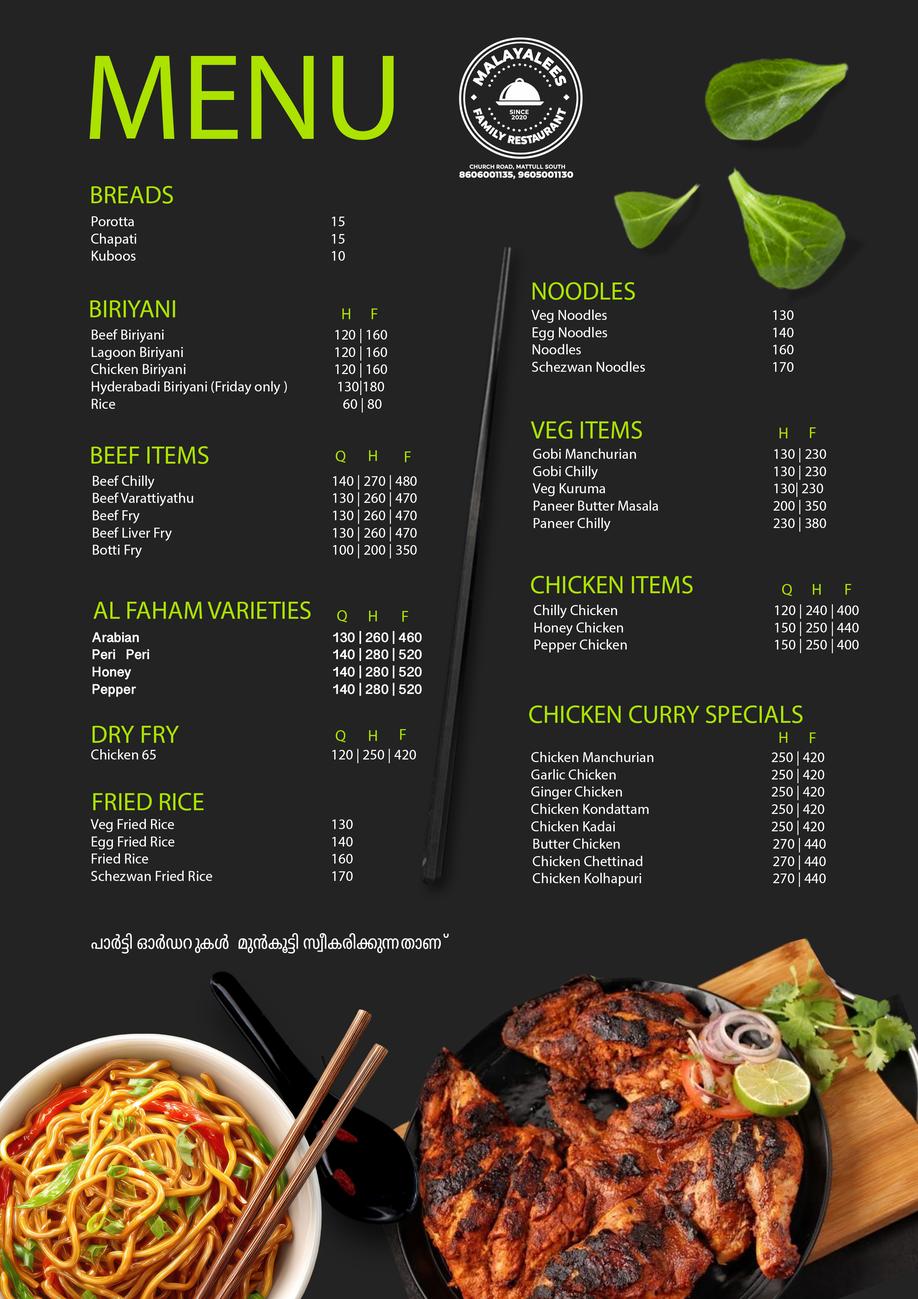
<style>
.page{position:relative;width:918px;height:1299px;background:#232323}
.page>*{position:absolute;margin:0}
.t1{font:123.1px "MyriadPro-Regular";color:#abe200}
.t2{font:25.2px "MyriadPro-Regular";color:#abe200}
.t3{font:14.4px "MyriadPro-Regular";color:#ffffff}
.t4{font:15.4px "MyriadPro-Regular";color:#abe200}
.t5{font:14.4px "MalayalamSangamMN-Bold";color:#ffffff}
</style>
<div class="page">
<p class="t1" style="left:90px;top:56px;width:304px;height:84px">MENU</p>
<p class="t2" style="left:91px;top:186px;width:82px;height:18px">BREADS</p>
<p class="t3" style="left:91px;top:216px;width:254px;height:45px">Porotta 15<br>Chapati 15<br>Kuboos 10</p>
<p class="t2" style="left:533px;top:282px;width:102px;height:18px">NOODLES</p>
<p class="t2" style="left:90px;top:300px;width:85px;height:17px">BIRIYANI</p>
<p class="t4" style="left:342px;top:308px;width:8px;height:11px">H</p>
<p class="t4" style="left:372px;top:308px;width:6px;height:11px">F</p>
<p class="t3" style="left:532px;top:310px;width:262px;height:62px">Veg Noodles 130<br>Egg Noodles 140<br>Noodles 160<br>Schezwan Noodles 170</p>
<p class="t3" style="left:91px;top:329px;width:296px;height:83px">Beef Biriyani                                      120 | 160<br>Lagoon Biriyani                                120 | 160<br>Chicken Biriyani                               120 | 160<br>Hyderabadi Biriyani (Friday only )    130|180<br>Rice     60 | 80</p>
<p class="t2" style="left:531px;top:421px;width:111px;height:18px">VEG ITEMS</p>
<p class="t4" style="left:780px;top:428px;width:7px;height:10px">H</p>
<p class="t4" style="left:810px;top:427px;width:6px;height:11px">F</p>
<p class="t2" style="left:91px;top:446px;width:117px;height:18px">BEEF ITEMS</p>
<p class="t3" style="left:533px;top:448px;width:293px;height:84px">Gobi Manchurian 130 | 230<br>Gobi Chilly 130 | 230<br>Veg Kuruma 130| 230<br>Paneer Butter Masala 200 | 350<br>Paneer Chilly 230 | 380</p>
<p class="t4" style="left:336px;top:451px;width:10px;height:12px">Q</p>
<p class="t4" style="left:369px;top:450px;width:8px;height:11px">H</p>
<p class="t4" style="left:405px;top:451px;width:6px;height:11px">F</p>
<p class="t3" style="left:93px;top:475px;width:324px;height:83px">Beef Chilly 140 | 270 | 480<br>Beef Varattiyathu 130 | 260 | 470<br>Beef Fry 130 | 260 | 470<br>Beef Liver Fry  130 | 260 | 470<br>Botti Fry 100 | 200 | 350</p>
<p class="t2" style="left:531px;top:576px;width:162px;height:17px">CHICKEN ITEMS</p>
<p class="t4" style="left:782px;top:584px;width:10px;height:12px">Q</p>
<p class="t4" style="left:813px;top:584px;width:8px;height:11px">H</p>
<p class="t4" style="left:846px;top:584px;width:6px;height:11px">F</p>
<p class="t2" style="left:93px;top:601px;width:218px;height:18px">AL FAHAM VARIETIES</p>
<p class="t3" style="left:534px;top:604px;width:325px;height:49px">Chilly Chicken 120 | 240 | 400<br>Honey Chicken 150 | 250 | 440<br>Pepper Chicken 150 | 250 | 400</p>
<p class="t4" style="left:337px;top:610px;width:10px;height:12px">Q</p>
<p class="t4" style="left:369px;top:610px;width:8px;height:11px">H</p>
<p class="t4" style="left:402px;top:611px;width:6px;height:11px">F</p>
<p class="t5" style="left:92px;top:631px;width:330px;height:66px">Arabian 130 | 260 | 460<br>Peri   Peri 140 | 280 | 520<br>Honey 140 | 280 | 520<br>Pepper 140 | 280 | 520</p>
<p class="t2" style="left:529px;top:705px;width:274px;height:18px">CHICKEN CURRY SPECIALS</p>
<p class="t2" style="left:93px;top:726px;width:86px;height:17px">DRY FRY</p>
<p class="t4" style="left:336px;top:730px;width:10px;height:12px">Q</p>
<p class="t4" style="left:369px;top:730px;width:8px;height:11px">H</p>
<p class="t4" style="left:400px;top:729px;width:6px;height:11px">F</p>
<p class="t4" style="left:780px;top:732px;width:7px;height:11px">H</p>
<p class="t4" style="left:810px;top:732px;width:6px;height:11px">F</p>
<p class="t3" style="left:91px;top:749px;width:325px;height:14px">Chicken 65 120 | 250 | 420</p>
<p class="t3" style="left:531px;top:751px;width:293px;height:84px">Chicken Manchurian 250 | 420<br>Garlic Chicken 250 | 420<br>Ginger Chicken 250 | 420<br>Chicken Kondattam 250 | 420<br>Chicken Kadai 250 | 420<br>Bu</p>
<p class="t2" style="left:93px;top:793px;width:111px;height:17px">FRIED RICE</p>
<p class="t3" style="left:91px;top:819px;width:262px;height:62px">Veg Fried Rice 130<br>Egg Fried Rice 140<br>Fried Rice 160<br>Schezwan Fried Rice 170</p>
<p class="t3" style="left:533px;top:838px;width:293px;height:49px">Butter Chicken 270 | 440<br>Chicken Chettinad 270 | 440<br>Chicken Kolhapuri 270 | 440</p>
</div>
